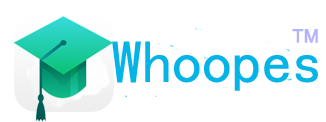
<style>
.page{position:relative;width:326px;height:122px;background:#ffffff}
.page>*{position:absolute;margin:0}
.t1{font:60px "KaiTi";color:#05b4e7}
</style>
<div class="page">
<p class="t1" style="left:112px;top:41px;width:206px;height:50px">Whoopes</p>
</div>
